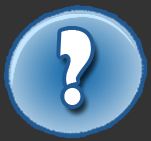
<style>
.page{position:relative;width:151px;height:141px;background:#333333}
.page>*{position:absolute;margin:0}
.t1{font:94.9px "ShowcardGothic-Reg";color:#ffffff;scale:0.77 1}
</style>
<div class="page">
<p class="t1" style="left:60px;top:30px;width:31px;height:75px">?</p>
</div>
